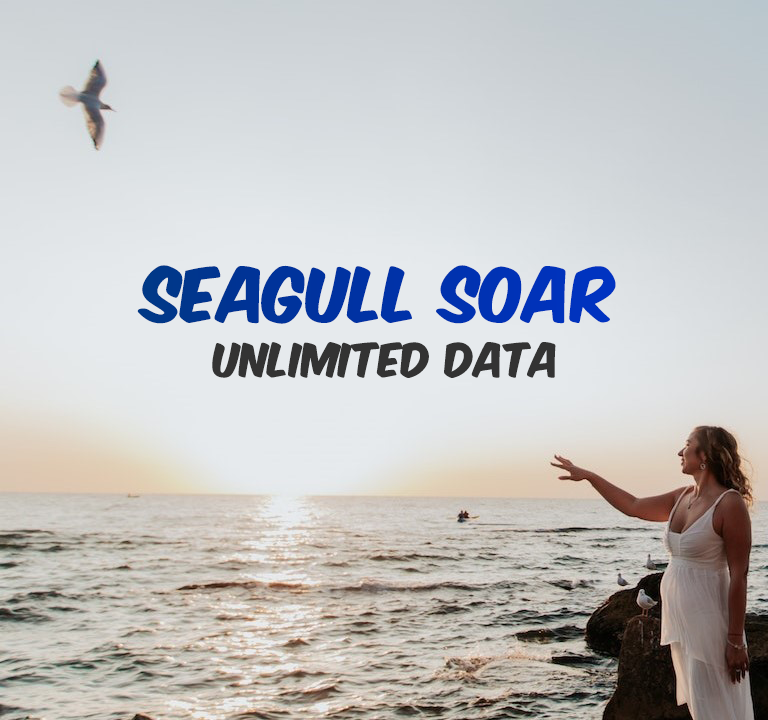
<style>
.page{position:relative;width:768px;height:720px}
.page>*{position:absolute;margin:0}
.t1{font:64px "KomikaAxis"}
.t2{font:40px "KomikaAxis";color:#333333}
</style>
<div class="page">
<p class="t1" style="left:137px;top:265px;width:479px;height:59px">Seagull Soar</p>
<p class="t2" style="left:212px;top:342px;width:344px;height:36px">unlimited data</p>
</div>
